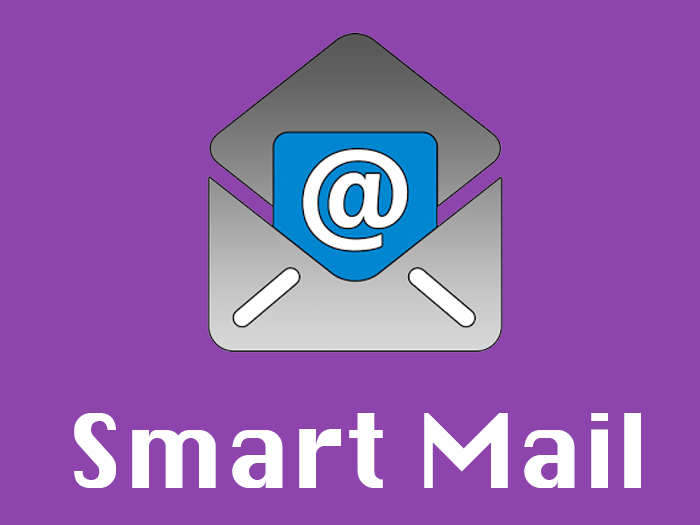
<style>
.page{position:relative;width:700px;height:525px;background:#8e44ad}
.page>*{position:absolute;margin:0}
.t1{font:100px "Silom";color:#ffffff}
</style>
<div class="page">
<p class="t1" style="left:74px;top:413px;width:567px;height:75px">Smart Mail</p>
</div>
